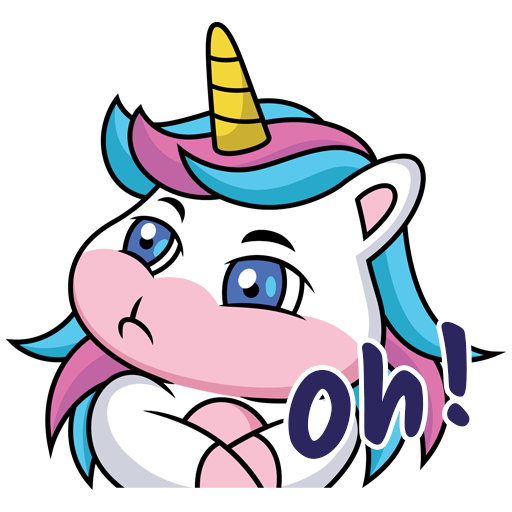
<style>
.page{position:relative;width:512px;height:512px;background:#ffffff}
.page>*{position:absolute;margin:0}
.t1{font:125px "Kalam-Bold";letter-spacing:0.025em;color:#2c265e;font-weight:bold}
</style>
<div class="page">
<p class="t1" style="left:288px;top:321px;width:182px;height:138px;rotate:-13deg">Oh!</p>
</div>
